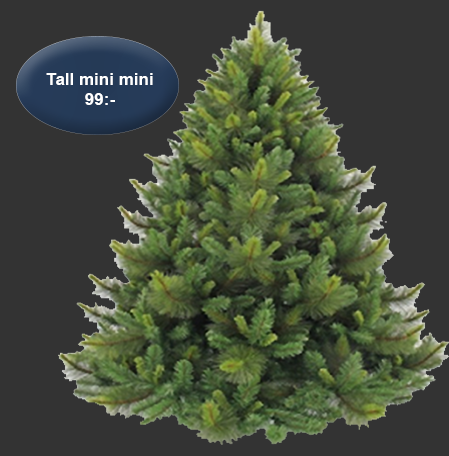
<style>
.page{position:relative;width:449px;height:456px;background:#333333}
.page>*{position:absolute;margin:0}
.t1{font:17px "Arial-BoldMT";color:#ffffff}
</style>
<div class="page">
<p class="t1" style="left:46px;top:73px;width:107px;height:32px;text-align:center">Tall mini mini<br>99:-</p>
</div>
